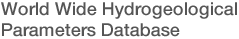
<style>
.page{position:relative;width:239px;height:39px;background:#ffffff}
.page>*{position:absolute;margin:0}
.t1{font:18px "HelveticaNeue-Medium";color:#555555}
</style>
<div class="page">
<p class="t1" style="left:1px;top:2px;width:236px;height:35px">World Wide Hydrogeological<br>Parameters Database</p>
</div>
